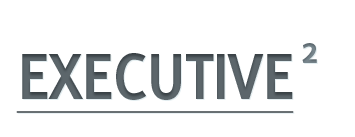
<style>
.page{position:relative;width:355px;height:137px;background:#ffffff}
.page>*{position:absolute;margin:0}
.t1{font:72px "Delicious-Bold";letter-spacing:-0.025em;color:#596267;text-decoration:underline}
.t2{font:40px "Delicious-Bold";letter-spacing:-0.025em;color:#717f86}
</style>
<div class="page">
<p class="t1" style="left:16px;top:53px;width:278px;height:60px">EXECUTIVE</p>
<p class="t2" style="left:302px;top:43px;width:15px;height:20px">2</p>
</div>
